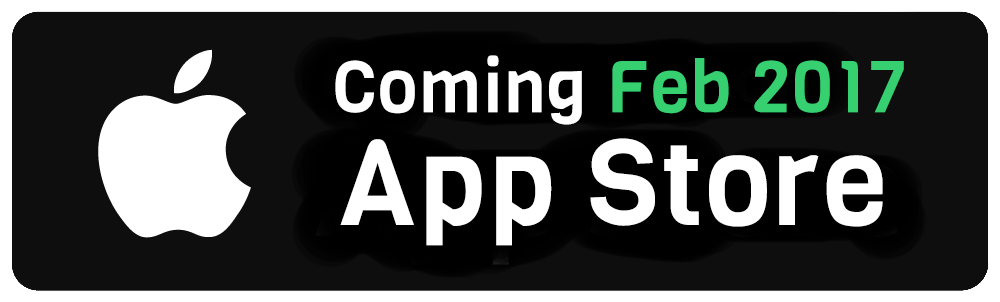
<style>
.page{position:relative;width:1000px;height:302px;background:#0f0e0f}
.page>*{position:absolute;margin:0}
.t1{font:72px "Viga-Regular";letter-spacing:0.02em;color:#36d070}
.t2{font:72px "Viga-Regular";letter-spacing:0.02em;color:#ffffff}
.t3{font:120px "Viga-Regular";letter-spacing:0.02em;color:#ffffff}
</style>
<div class="page">
<p class="t1" style="left:335px;top:55px;width:569px;height:70px"><span class="t2">Coming </span>Feb 2017</p>
<p class="t3" style="left:340px;top:138px;width:543px;height:108px">App Store</p>
</div>
